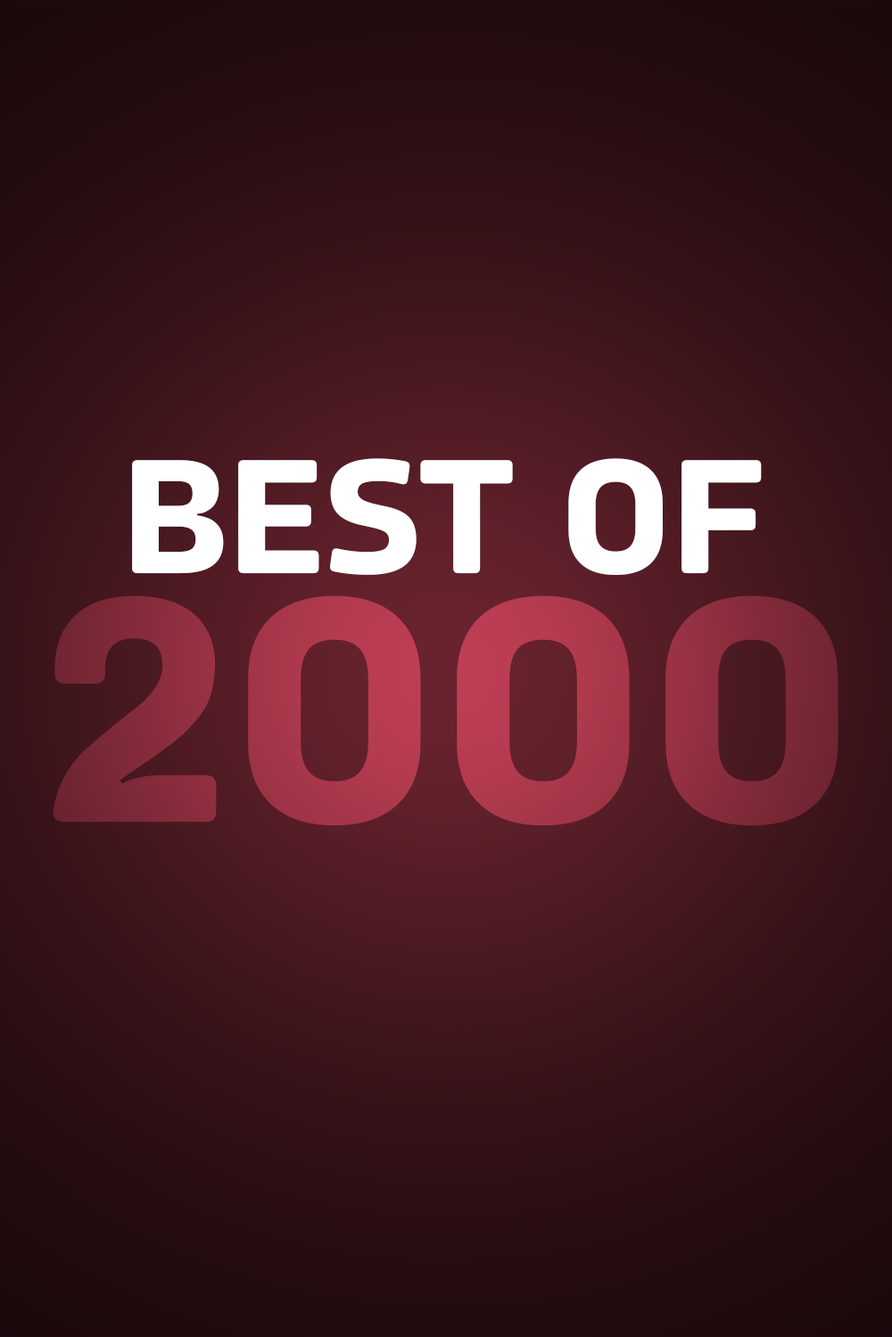
<style>
.page{position:relative;width:892px;height:1337px}
.page>*{position:absolute;margin:0}
.t1{font:161.8px "Amfibia-Bold";color:#ffffff;scale:1.03 1}
.t2{font:323.6px "Amfibia-Bold";scale:1.03 1}
</style>
<div class="page">
<p class="t1" style="left:132px;top:458px;width:629px;height:117px">BEST OF</p>
<p class="t2" style="left:53px;top:596px;width:785px;height:230px">2000</p>
</div>
